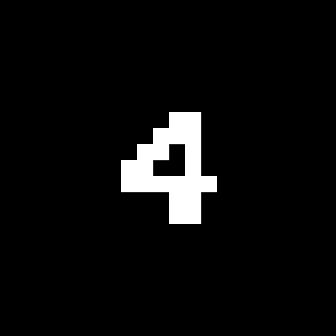
<style>
.page{position:relative;width:336px;height:336px;background:#000000}
.page>*{position:absolute;margin:0}
.t1{font:144px "PixeloidSans-Bold";color:#ffffff}
</style>
<div class="page">
<p class="t1" style="left:121px;top:112px;width:96px;height:112px">4</p>
</div>
